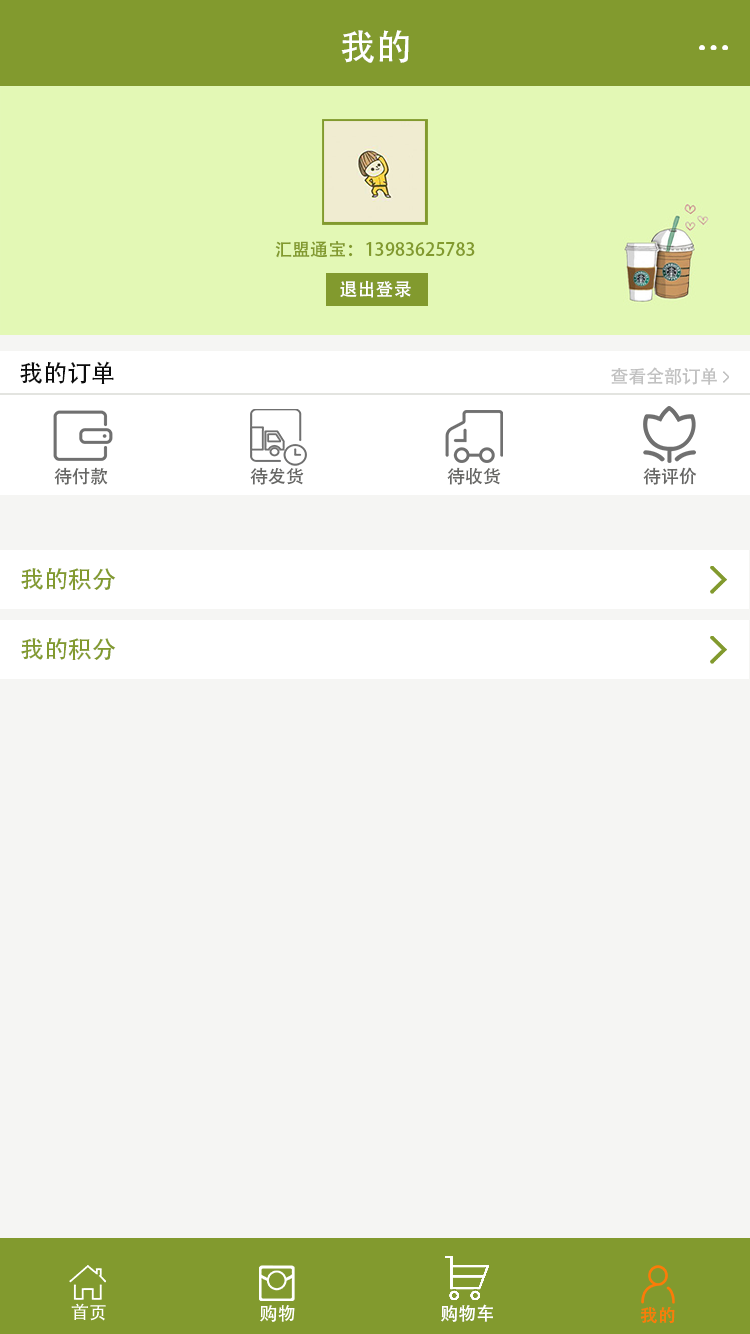
<style>
.page{position:relative;width:750px;height:1334px;background:#f5f5f3}
.page>*{position:absolute;margin:0}
.t1{font:36px "AdobeHeitiStd-Regular";color:#ffffff}
.t2{font:18px "AdobeHeitiStd-Regular";color:#829a2e}
.t3{font:18px "AdobeHeitiStd-Regular";color:#ffffff}
.t4{font:24px "AdobeHeitiStd-Regular";color:#0c0c0c}
.t5{font:18px "AdobeHeitiStd-Regular";color:#c1c1c1}
.t6{font:18px "AdobeHeitiStd-Regular";color:#676765}
.t7{font:24px "AdobeHeitiStd-Regular";color:#829a2e}
.t8{font:18px "AdobeHeitiStd-Regular";color:#fc7b08}
</style>
<div class="page">
<p class="t1" style="left:341px;top:30px;width:68px;height:33px">我的</p>
<p class="t2" style="left:275px;top:241px;width:200px;height:17px">汇盟通宝：13983625783</p>
<p class="t3" style="left:340px;top:280px;width:71px;height:18px">退出登录</p>
<p class="t4" style="left:20px;top:361px;width:94px;height:23px">我的订单</p>
<p class="t5" style="left:611px;top:367px;width:106px;height:18px">查看全部订单</p>
<p class="t6" style="left:54px;top:467px;width:54px;height:18px">待付款</p>
<p class="t6" style="left:250px;top:467px;width:54px;height:18px">待发货</p>
<p class="t6" style="left:447px;top:467px;width:54px;height:18px">待收货</p>
<p class="t6" style="left:643px;top:467px;width:54px;height:18px">待评价</p>
<p class="t7" style="left:21px;top:568px;width:95px;height:22px">我的积分</p>
<p class="t7" style="left:21px;top:638px;width:95px;height:22px">我的积分</p>
<p class="t3" style="left:441px;top:1304px;width:52px;height:18px">购物车</p>
<p class="t8" style="left:640px;top:1306px;width:35px;height:18px">我的</p>
</div>
